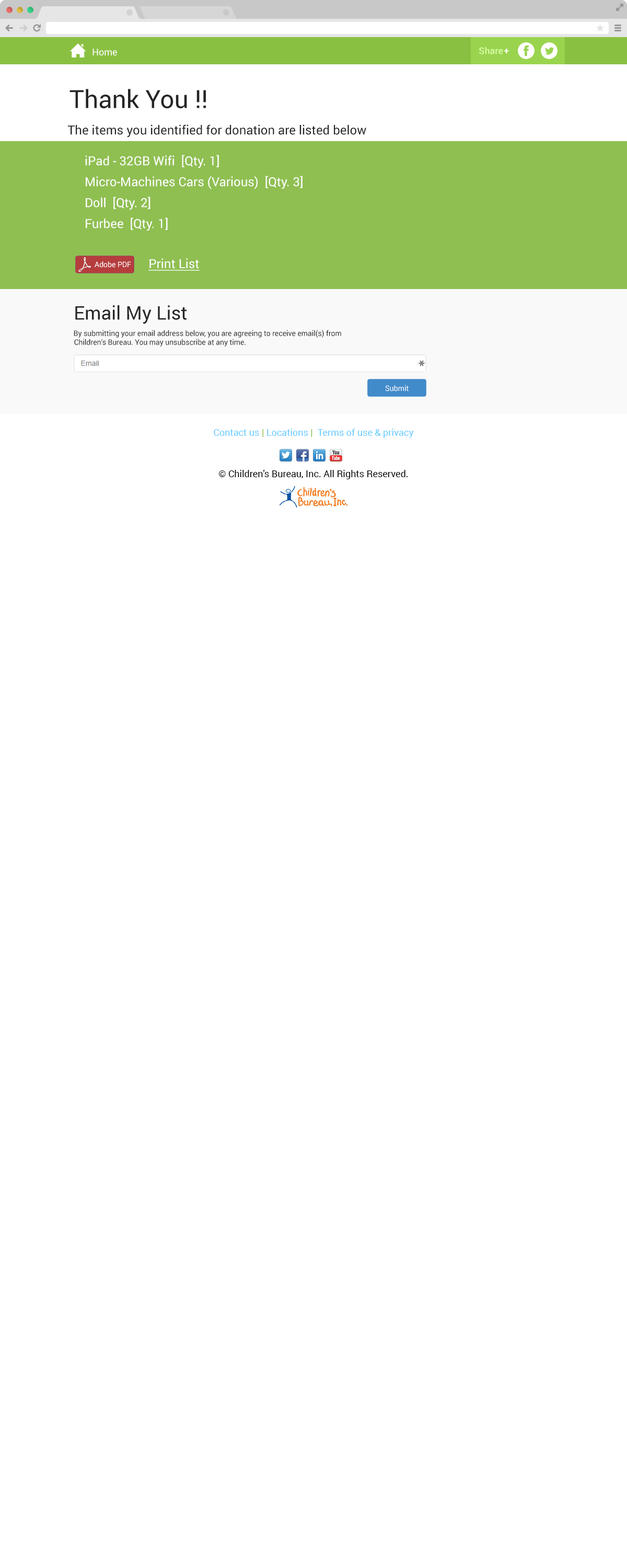
<style>
.page{position:relative;width:627px;height:1568px;background:#ffffff}
.page>*{position:absolute;margin:0}
.t1{font:9.4px "Roboto-Regular";color:#ffffff}
.t2{font:25.1px "Roboto-Regular";color:#252525}
.t3{font:12.5px "Roboto-Regular";color:#252525}
.t4{font:12.5px "Roboto-Regular";color:#fefefe}
.t5{font:12.5px "Roboto-Regular";color:#fefefe;text-decoration:underline}
.t6{font:18.8px "Roboto-Regular";color:#252525}
.t7{font:7.5px/9px "Roboto-Regular";color:#252525}
</style>
<div class="page">
<p class="t1" style="left:93px;top:49px;width:24px;height:7px">Home</p>
<p class="t2" style="left:70px;top:89px;width:136px;height:20px">Thank You !!</p>
<p class="t3" style="left:67px;top:124px;width:299px;height:13px">The items you identified for donation are listed below</p>
<p class="t4" style="left:85px;top:155px;width:134px;height:13px">iPad - 32GB Wifi  [Qty. 1]</p>
<p class="t4" style="left:86px;top:176px;width:217px;height:13px">Micro-Machines Cars (Various)  [Qty. 3]</p>
<p class="t4" style="left:86px;top:197px;width:65px;height:13px">Doll  [Qty. 2]</p>
<p class="t4" style="left:86px;top:217px;width:82px;height:14px">Furbee  [Qty. 1]</p>
<p class="t5" style="left:148px;top:258px;width:52px;height:13px">Print List</p>
<p class="t6" style="left:75px;top:305px;width:112px;height:19px">Email My List</p>
<p class="t7" style="left:74px;top:330px;width:267px;height:17px">By submitting your email address below, you are agreeing to receive email(s) from <br>Children’s Bureau. You may unsubscribe at any time.</p>
</div>
